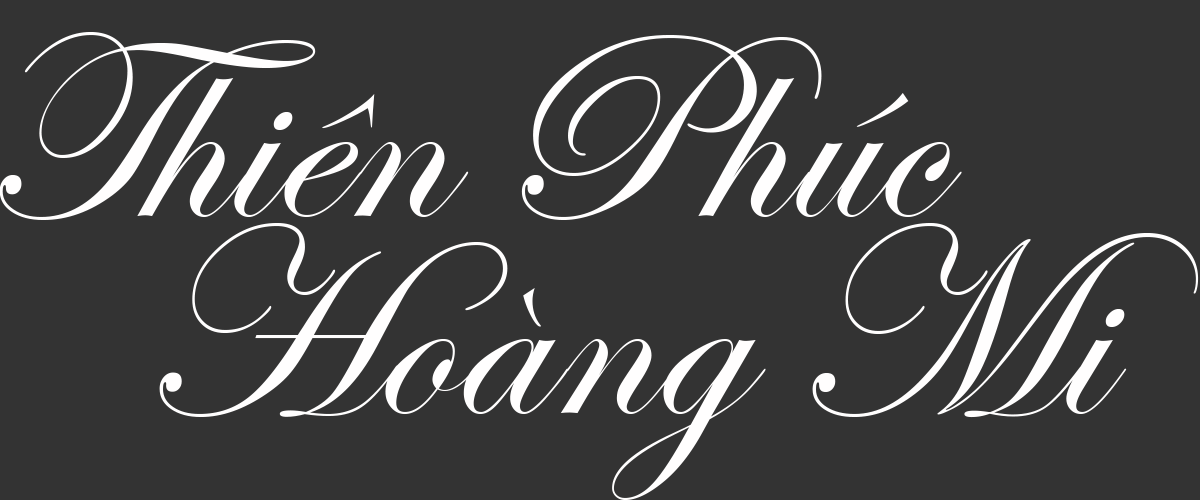
<style>
.page{position:relative;width:1200px;height:500px;background:#333333}
.page>*{position:absolute;margin:0}
.t1{font:272.2px "EdwardianScriptITC";color:#fffefe}
</style>
<div class="page">
<p class="t1" style="left:0px;top:32px;width:962px;height:188px">Thiên Phúc</p>
<p class="t1" style="left:159px;top:223px;width:1040px;height:277px">Hoàng Mi</p>
</div>
